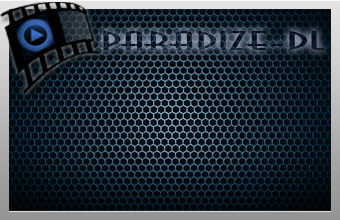
<style>
.page{position:relative;width:340px;height:220px}
.page>*{position:absolute;margin:0}
.t1{font:25.2px "Anastasia";scale:2.5 1}
</style>
<div class="page">
<p class="t1" style="left:103px;top:31px;width:223px;height:19px">paradize-dl</p>
</div>
